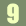
<style>
.page{position:relative;width:26px;height:26px;background:#7b8c6b}
.page>*{position:absolute;margin:0}
.t1{font:24px "Impact";letter-spacing:0.05em;color:#f3ffbd}
</style>
<div class="page">
<p class="t1" style="left:7px;top:3px;width:12px;height:21px">9</p>
</div>
